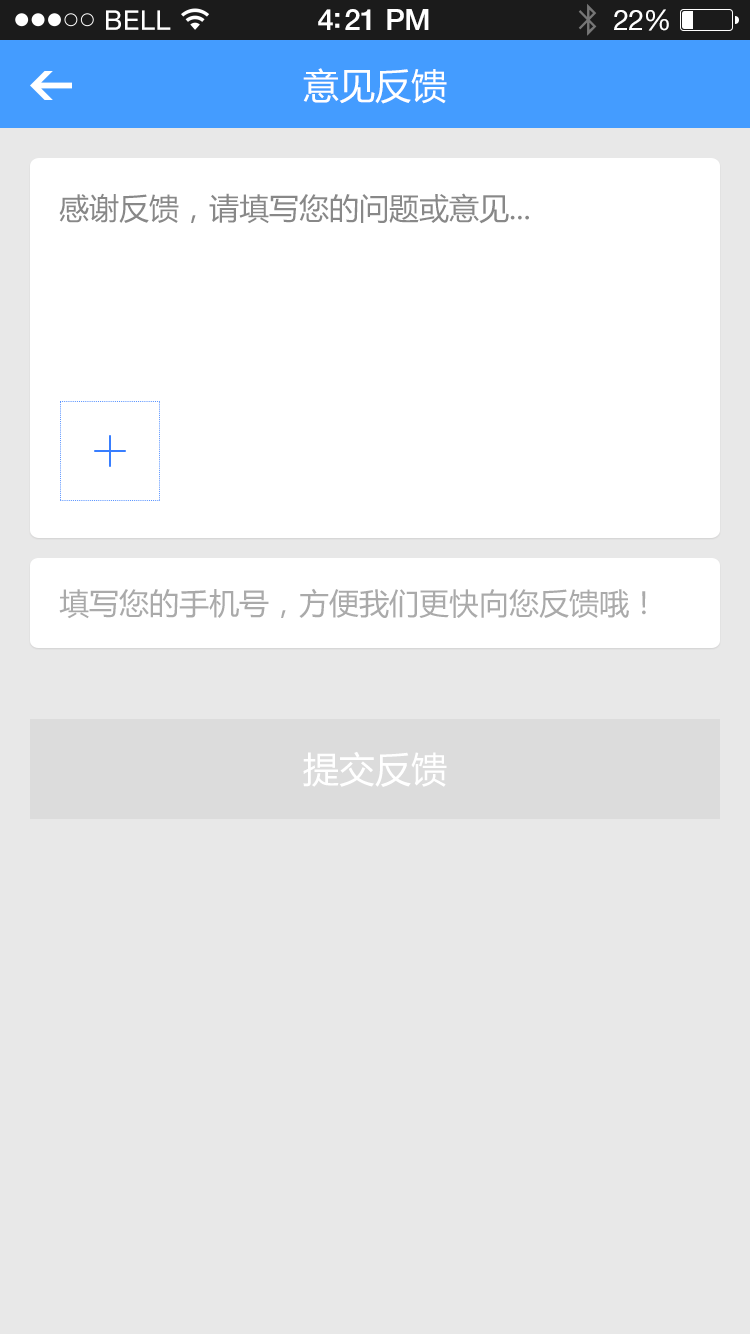
<style>
.page{position:relative;width:750px;height:1334px;background:#e8e8e8}
.page>*{position:absolute;margin:0}
.t1{font:36px "MicrosoftYaHei";color:#ffffff}
.t2{font:30px "MicrosoftYaHei";color:#888888}
.t3{font:30px "MicrosoftYaHei";color:#aaaaaa}
</style>
<div class="page">
<p class="t1" style="left:303px;top:68px;width:144px;height:36px">意见反馈</p>
<p class="t2" style="left:59px;top:193px;width:470px;height:31px">感谢反馈，请填写您的问题或意见...</p>
<p class="t3" style="left:59px;top:588px;width:587px;height:31px">填写您的手机号，方便我们更快向您反馈哦！</p>
<p class="t1" style="left:303px;top:751px;width:144px;height:36px">提交反馈</p>
</div>
